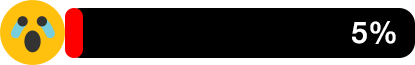
<style>
.page{position:relative;width:415px;height:65px;background:#000000}
.page>*{position:absolute;margin:0}
.t1{font:30px "HelveticaNeueCyr-Medium";color:#ffffff}
</style>
<div class="page">
<p class="t1" style="left:352px;top:21px;width:44px;height:23px">5%</p>
</div>
